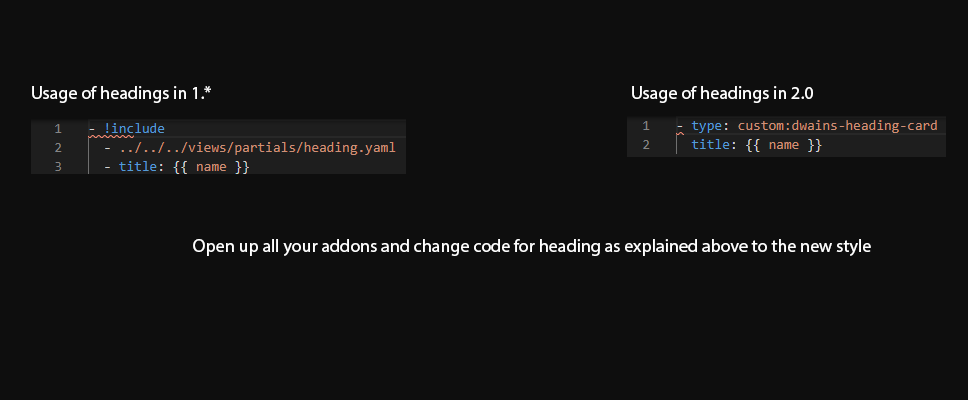
<style>
.page{position:relative;width:968px;height:400px;background:#0e0e0e}
.page>*{position:absolute;margin:0}
.t1{font:18px "MyriadPro-Regular";color:#ffffff}
</style>
<div class="page">
<p class="t1" style="left:32px;top:86px;width:179px;height:17px">Usage of headings in 1.*</p>
<p class="t1" style="left:632px;top:86px;width:181px;height:17px">Usage of headings in 2.0</p>
<p class="t1" style="left:193px;top:239px;width:678px;height:17px">Open up all your addons and change code for heading as explained above to the new style</p>
</div>
